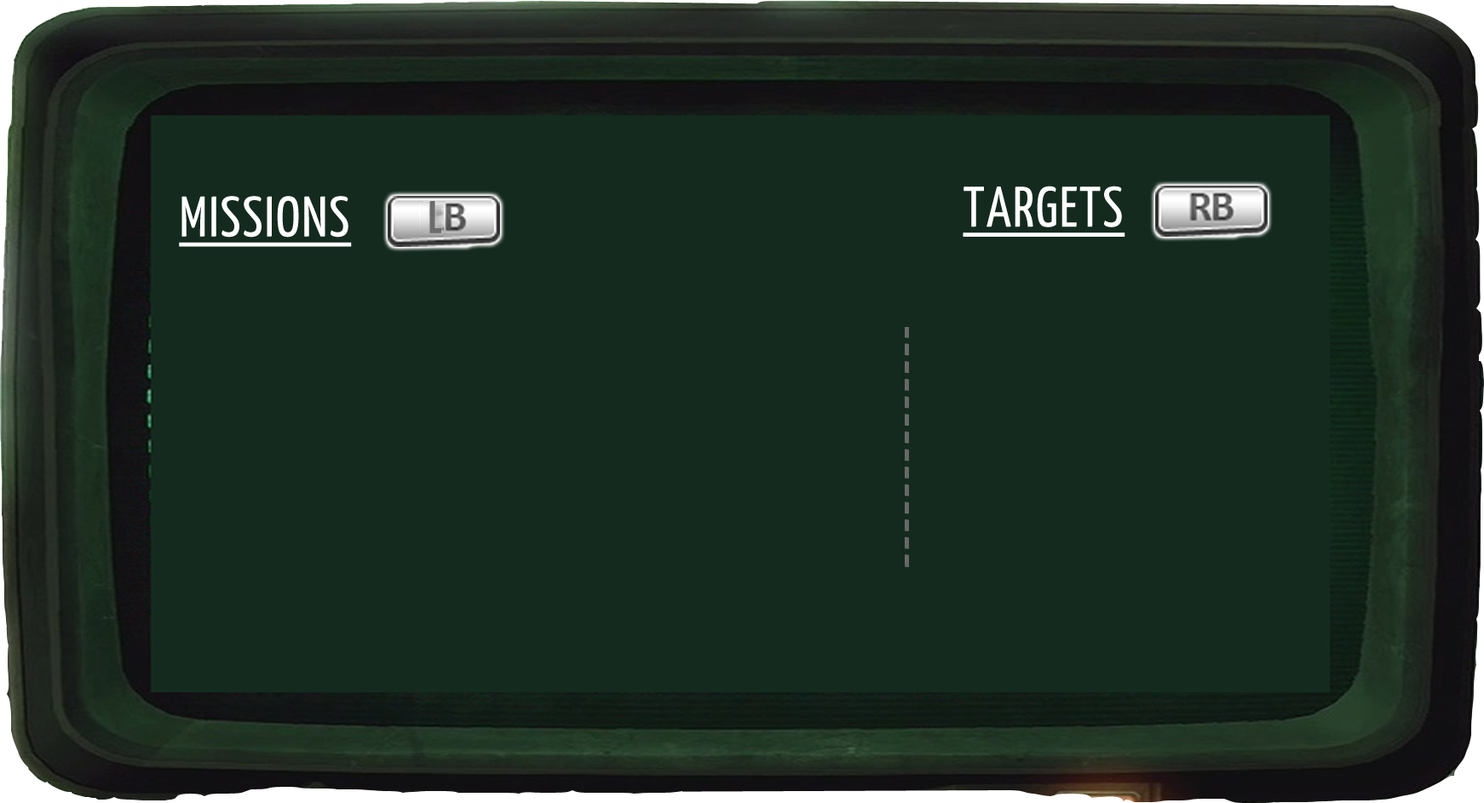
<style>
.page{position:relative;width:1484px;height:803px;background:#142a1e}
.page>*{position:absolute;margin:0}
.t1{font:57.1px "YanoneKaffeesatz-Regular";letter-spacing:0.03em;color:#ffffff;text-decoration:underline}
.t2{font:46px "YanoneKaffeesatz-Bold";letter-spacing:0.03em;color:#6c6c6c}
</style>
<div class="page">
<p class="t1" style="left:963px;top:186px;width:162px;height:51px">TARGETS</p>
<p class="t1" style="left:179px;top:196px;width:173px;height:51px">MISSIONS</p>
<p class="t2" style="left:429px;top:201px;width:12px;height:32px">L</p>
</div>
